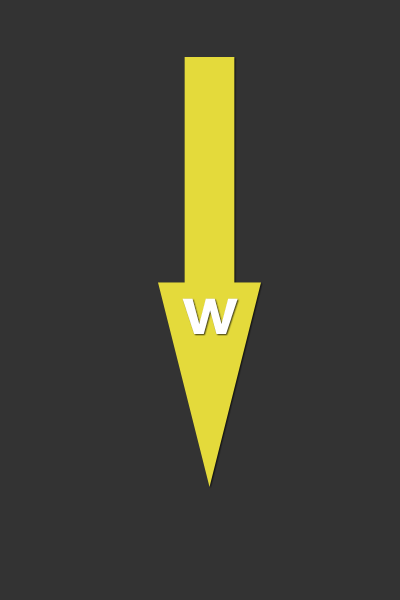
<style>
.page{position:relative;width:400px;height:600px;background:#333333}
.page>*{position:absolute;margin:0}
.t1{font:50px "Montserrat-Bold";color:#ffffff}
</style>
<div class="page">
<p class="t1" style="left:182px;top:298px;width:56px;height:36px">W</p>
</div>
